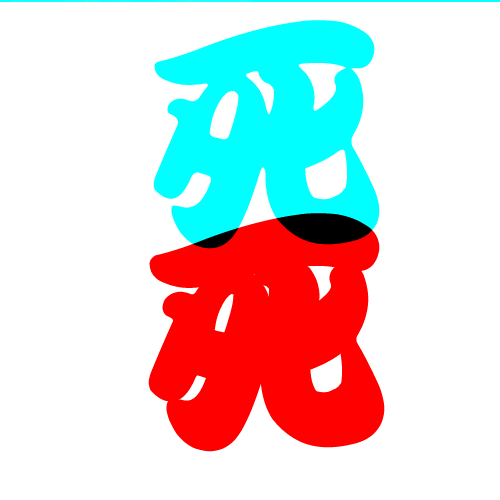
<style>
.page{position:relative;width:500px;height:500px;background:#ffffff}
.page>*{position:absolute;margin:0}
.t1{font:250px "HanWangKanTan";color:#00ffff}
</style>
<div class="page">
<p class="t1" style="left:153px;top:18px;width:227px;height:229px">死</p>
</div>
